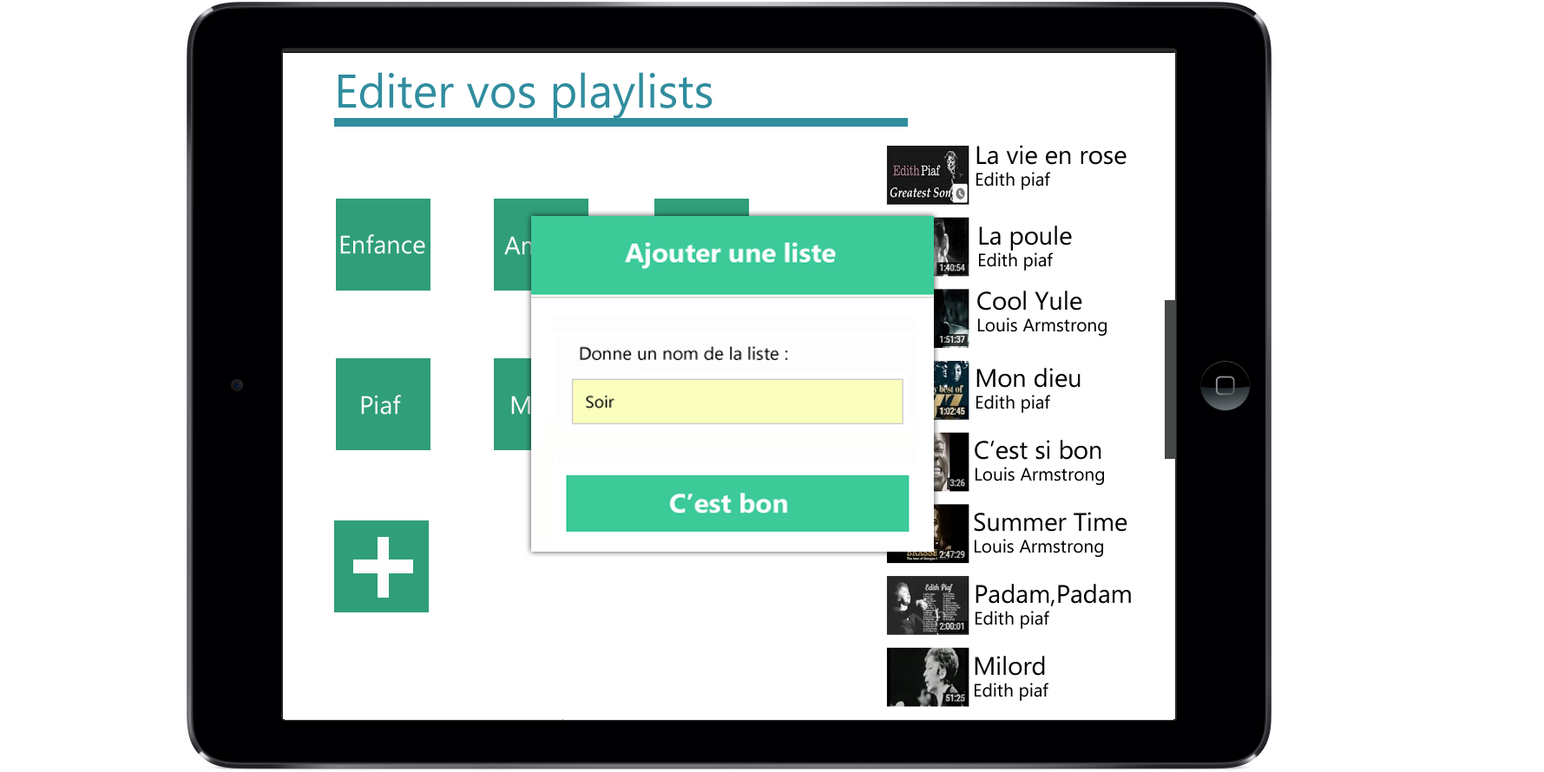
<style>
.page{position:relative;width:1544px;height:772px;background:#ffffff}
.page>*{position:absolute;margin:0}
.t1{font:25.3px "NirmalaUI";color:#020202}
.t2{font:18.1px "NirmalaUI";color:#020202}
.t3{font:25.3px "NirmalaUI";color:#fbfdfc}
.t4{font:25.3px "NirmalaUI"}
</style>
<div class="page">
<p class="t1" style="left:976px;top:145px;width:150px;height:45px">La vie en rose<br><span class="t2">Edith piaf</span></p>
<p class="t2" style="left:979px;top:226px;width:93px;height:45px"><span class="t1">La poule<br></span>Edith piaf</p>
<p class="t3" style="left:340px;top:234px;width:85px;height:20px">Enfance</p>
<p class="t4" style="left:504px;top:236px;width:77px;height:19px">Amour</p>
<p class="t2" style="left:977px;top:291px;width:129px;height:45px"><span class="t1">Cool Yule<br></span>Louis Armstrong</p>
<p class="t2" style="left:976px;top:368px;width:104px;height:45px"><span class="t1">Mon dieu<br></span>Edith piaf</p>
<p class="t3" style="left:361px;top:395px;width:40px;height:20px">Piaf</p>
<p class="t2" style="left:975px;top:440px;width:129px;height:45px"><span class="t1">C’est si bon<br></span>Louis Armstrong</p>
<p class="t2" style="left:974px;top:512px;width:153px;height:45px"><span class="t1">Summer Time<br></span>Louis Armstrong</p>
<p class="t1" style="left:975px;top:584px;width:156px;height:45px">Padam,Padam<br><span class="t2">Edith piaf</span></p>
<p class="t2" style="left:975px;top:656px;width:73px;height:45px"><span class="t1">Milord<br></span>Edith piaf</p>
</div>
